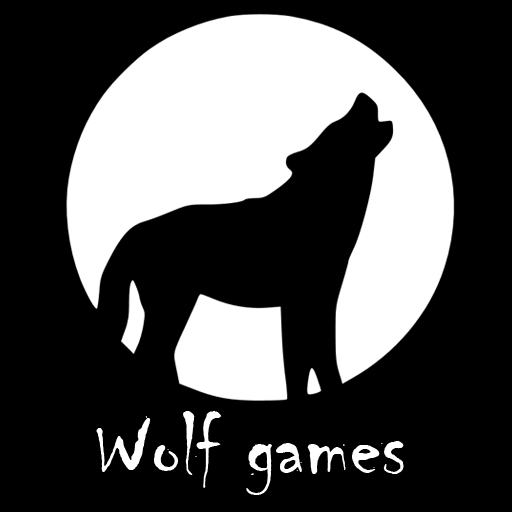
<style>
.page{position:relative;width:512px;height:512px;background:#000000}
.page>*{position:absolute;margin:0}
.t1{font:95.4px "Chiller-Regular";color:#ffffff}
</style>
<div class="page">
<p class="t1" style="left:96px;top:411px;width:308px;height:84px">Wolf games</p>
</div>
